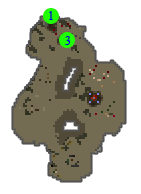
<style>
.page{position:relative;width:141px;height:194px;background:#ffffff}
.page>*{position:absolute;margin:0}
.t1{font:20px "TimesNewRomanPSMT";color:#0101dd}
</style>
<div class="page">
<p class="t1" style="left:49px;top:11px;width:4px;height:9px">1</p>
<p class="t1" style="left:65px;top:36px;width:6px;height:9px">3</p>
</div>
